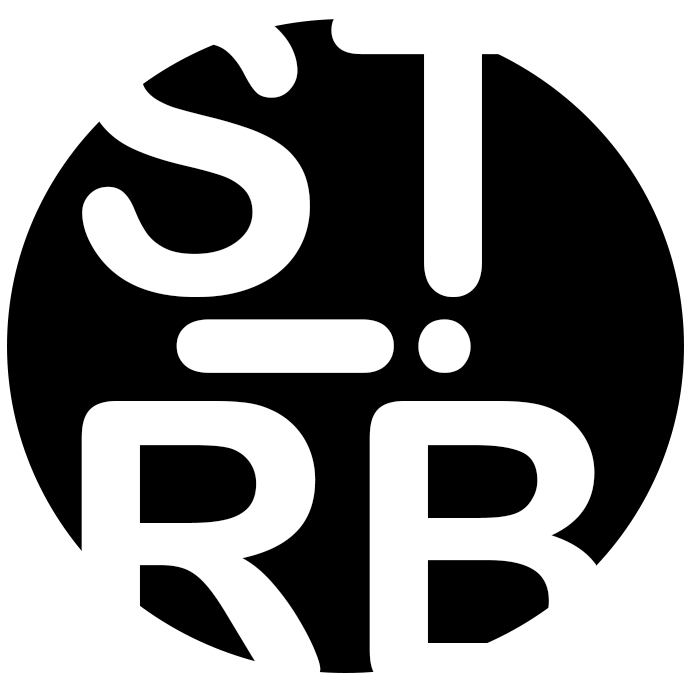
<style>
.page{position:relative;width:691px;height:692px;background:#ffffff}
.page>*{position:absolute;margin:0}
.t1{font:400px "ArialRoundedMTBold";color:#ffffff}
</style>
<div class="page">
<p class="t1" style="left:82px;top:1px;width:493px;height:296px">ST</p>
<p class="t1" style="left:176px;top:319px;width:295px;height:54px;rotate:90deg">i</p>
<p class="t1" style="left:81px;top:401px;width:527px;height:291px">RB</p>
</div>
